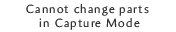
<style>
.page{position:relative;width:176px;height:32px;background:#ffffff}
.page>*{position:absolute;margin:0}
.t1{font:12px/14px "Amira-Light";letter-spacing:0.1em;color:#333333}
</style>
<div class="page">
<p class="t1" style="left:26px;top:4px;width:123px;height:26px;text-align:center">Cannot change parts <br>in Capture Mode</p>
</div>
